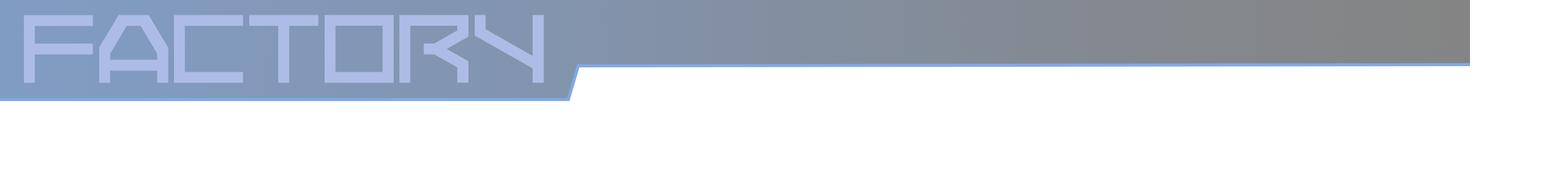
<style>
.page{position:relative;width:1568px;height:196px;background:#ffffff}
.page>*{position:absolute;margin:0}
.t1{font:77.2px "7THDR2020Regular";letter-spacing:-0.055em;color:#afbfeb}
</style>
<div class="page">
<p class="t1" style="left:24px;top:15px;width:520px;height:68px;opacity:0.9">FACTORY</p>
</div>
